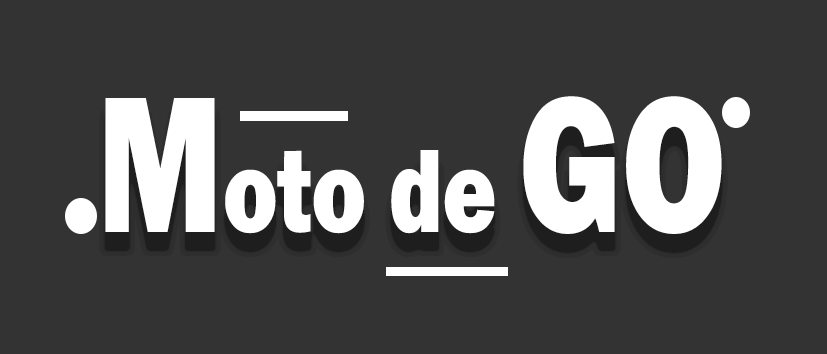
<style>
.page{position:relative;width:827px;height:354px;background:#333333}
.page>*{position:absolute;margin:0}
.t1{font:122.3px "FranklinGothic-Heavy";color:#ffffff;scale:0.75 1}
.t2{font:200.3px "FranklinGothic-Heavy";color:#ffffff;scale:0.75 1}
.t3{font:200px "FranklinGothic-Heavy";color:#ffffff;scale:0.75 1}
</style>
<div class="page">
<p class="t1" style="left:105px;top:96px;width:617px;height:138px"><span class="t2">M</span>oto de <span class="t3">GO</span></p>
</div>
